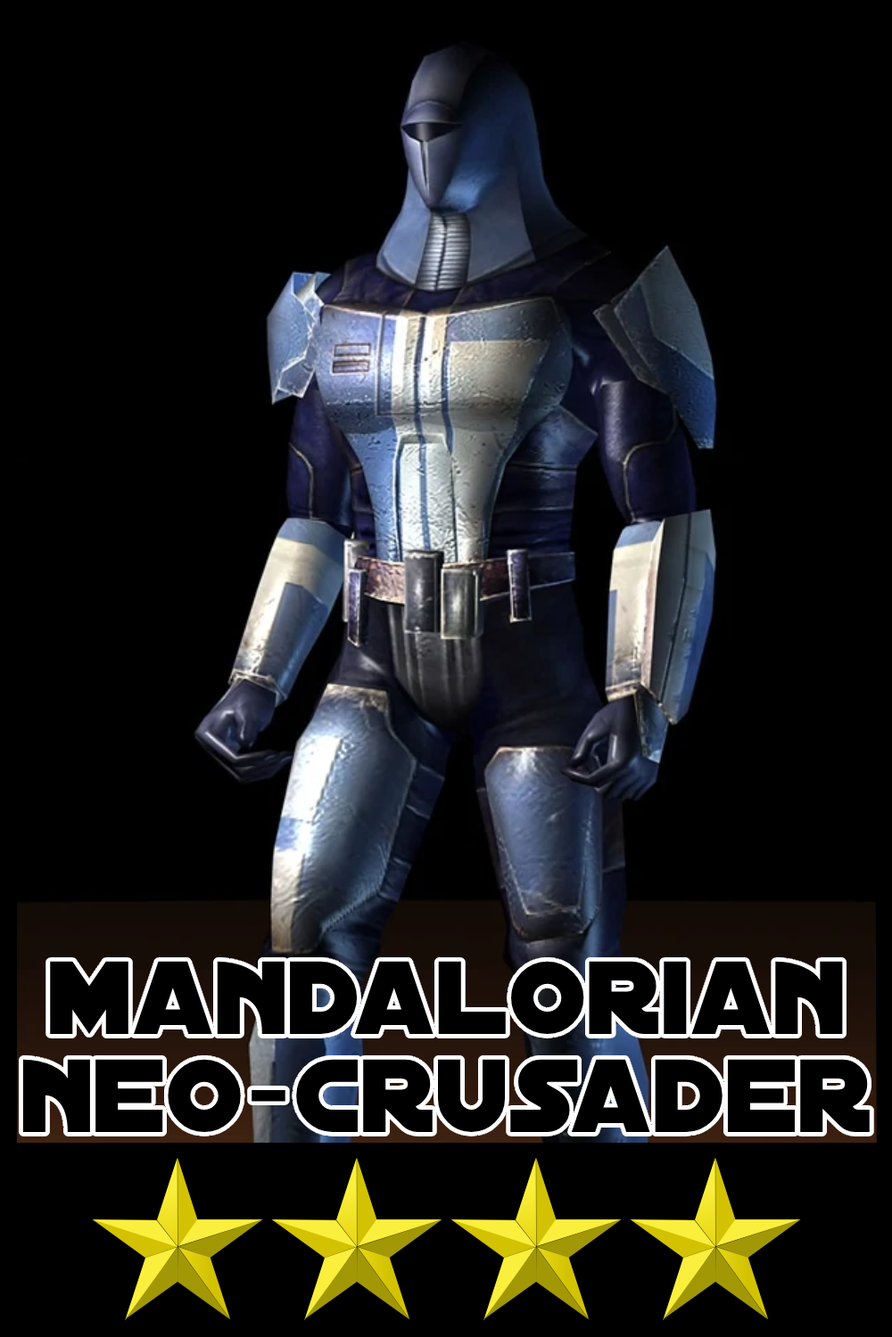
<style>
.page{position:relative;width:892px;height:1337px;background:#000000}
.page>*{position:absolute;margin:0}
.t1{font:111.5px/98.6px "DistantGalaxy";color:#000000}
</style>
<div class="page">
<p class="t1" style="left:22px;top:961px;width:847px;height:171px;text-align:center">mandalorian<br>neo-crusader</p>
</div>
